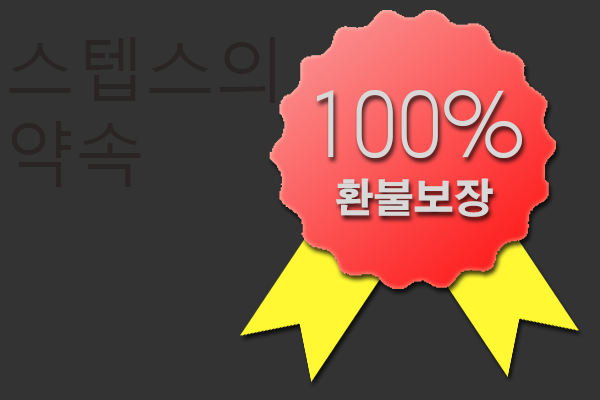
<style>
.page{position:relative;width:600px;height:400px;background:#333333}
.page>*{position:absolute;margin:0}
.t1{font:70px "MalgunGothicRegular";color:#2a2525}
.t2{font:100px "ARBONNIE";color:#d8d8d8}
.t3{font:40px "AdobeGothicStd-Bold";color:#d8d8d8}
</style>
<div class="page">
<p class="t1" style="left:9px;top:37px;width:266px;height:150px;text-align:right">스텝스의 약속</p>
<p class="t2" style="left:317px;top:90px;width:205px;height:68px">100%</p>
<p class="t3" style="left:336px;top:178px;width:157px;height:39px">환불보장</p>
</div>
